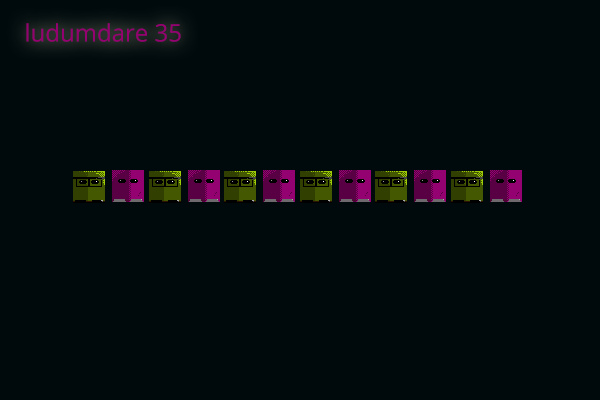
<style>
.page{position:relative;width:600px;height:400px;background:#00090c}
.page>*{position:absolute;margin:0}
.t1{font:24px "OpenSans";color:#930270}
</style>
<div class="page">
<p class="t1" style="left:26px;top:23px;width:155px;height:19px">ludumdare 35</p>
</div>
